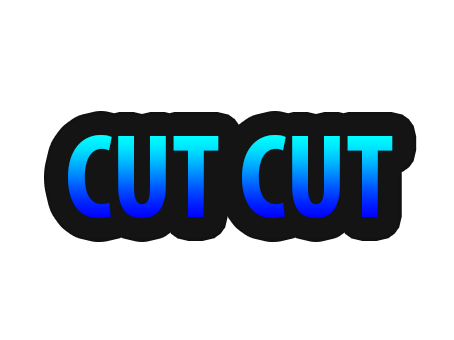
<style>
.page{position:relative;width:454px;height:340px;background:#ffffff}
.page>*{position:absolute;margin:0}
.t1{font:120px "MyriadPro-BoldCond"}
</style>
<div class="page">
<p class="t1" style="left:68px;top:135px;width:325px;height:84px">CUT CUT</p>
</div>
